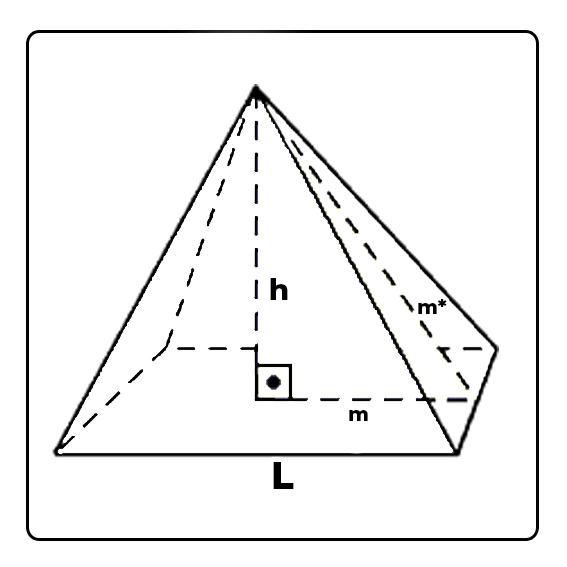
<style>
.page{position:relative;width:567px;height:567px;background:#ffffff}
.page>*{position:absolute;margin:0}
.t1{font:28.6px "Montserrat-ExtraBold";color:#000000}
.t2{font:19.7px "Montserrat-ExtraBold";color:#000000}
.t3{font:37.6px "Montserrat-ExtraBold";color:#000000}
</style>
<div class="page">
<p class="t1" style="left:270px;top:278px;width:18px;height:22px">h</p>
<p class="t2" style="left:418px;top:299px;width:29px;height:15px">m*</p>
<p class="t2" style="left:349px;top:410px;width:19px;height:11px">m</p>
<p class="t3" style="left:273px;top:462px;width:21px;height:27px">L</p>
</div>
